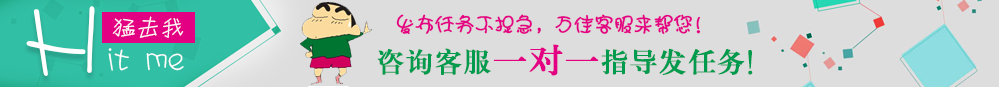
<style>
.page{position:relative;width:999px;height:87px;background:#dddddd}
.page>*{position:absolute;margin:0}
.t1{font:102.5px "JYaYa";color:#ffffff}
.t2{font:24px "JYaYa";color:#ffffff}
.t3{font:19.8px "JWaWAZuan";color:#e30083;font-weight:bold}
.t4{font:32.5px "JYaYa";color:#ffffff;scale:1.04 1}
.t5{font:28.3px "SungtiCSEG-Medium-GB";color:#009b4d;font-weight:bold}
.t6{font:35px "SungtiCSEG-Medium-GB";color:#e40082;font-weight:bold}
</style>
<div class="page">
<p class="t1" style="left:26px;top:6px;width:69px;height:70px">H</p>
<p class="t2" style="left:112px;top:16px;width:72px;height:22px">猛击我</p>
<p class="t3" style="left:396px;top:14px;width:305px;height:21px">发布任务不捉急，万佳客服来帮您！</p>
<p class="t4" style="left:108px;top:48px;width:76px;height:23px">it me</p>
<p class="t5" style="left:377px;top:44px;width:376px;height:32px">咨询客服<span class="t6">一对一</span>指导发任务！</p>
</div>
